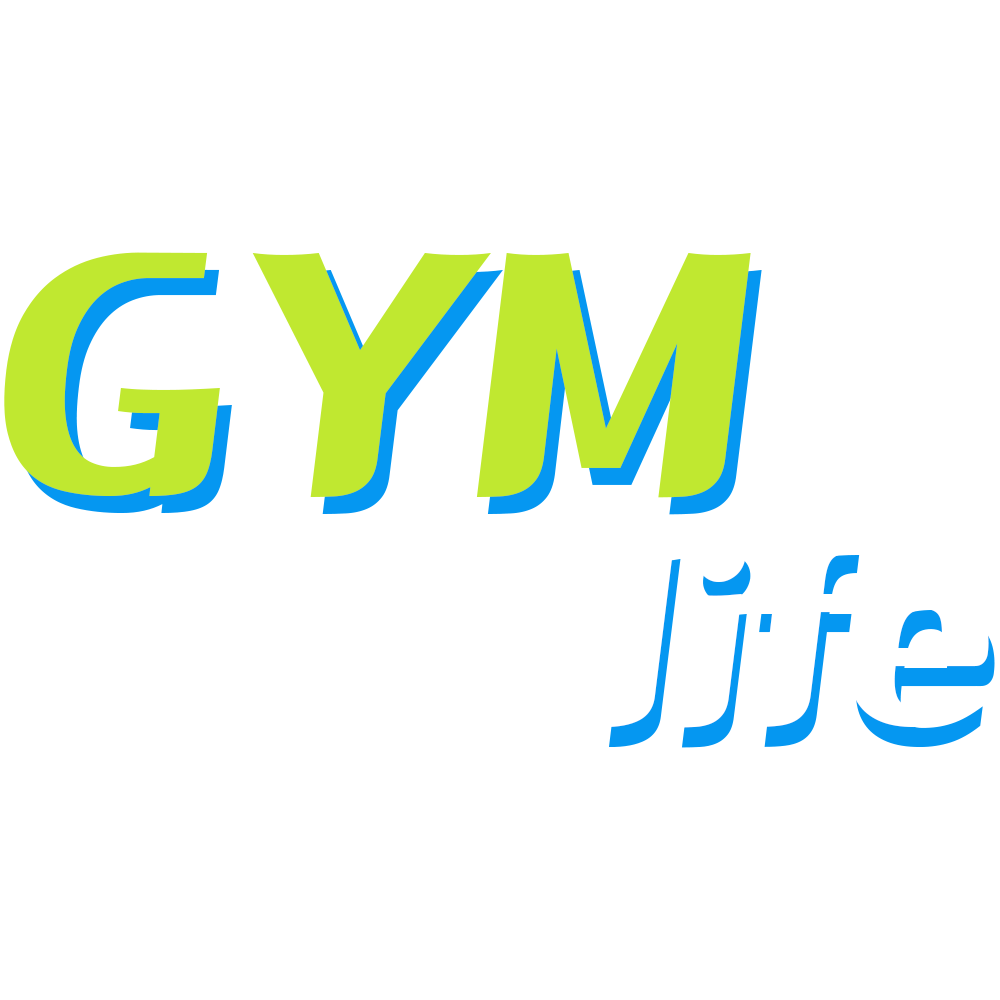
<style>
.page{position:relative;width:1000px;height:1000px;background:#ffffff}
.page>*{position:absolute;margin:0}
.t1{font:320.4px "HULifeStyle_m";color:#c0e830}
.t2{font:247.6px "HULifeStyle_m";color:#ffffff}
.t3{font:247.6px "HULifeStyle_m"}
</style>
<div class="page">
<p class="t1" style="left:4px;top:252px;width:747px;height:246px">GYM</p>
<p class="t1" style="left:16px;top:269px;width:746px;height:246px">GYM</p>
<p class="t2" style="left:603px;top:535px;width:386px;height:193px">life</p>
<p class="t3" style="left:609px;top:555px;width:386px;height:193px">life</p>
</div>
